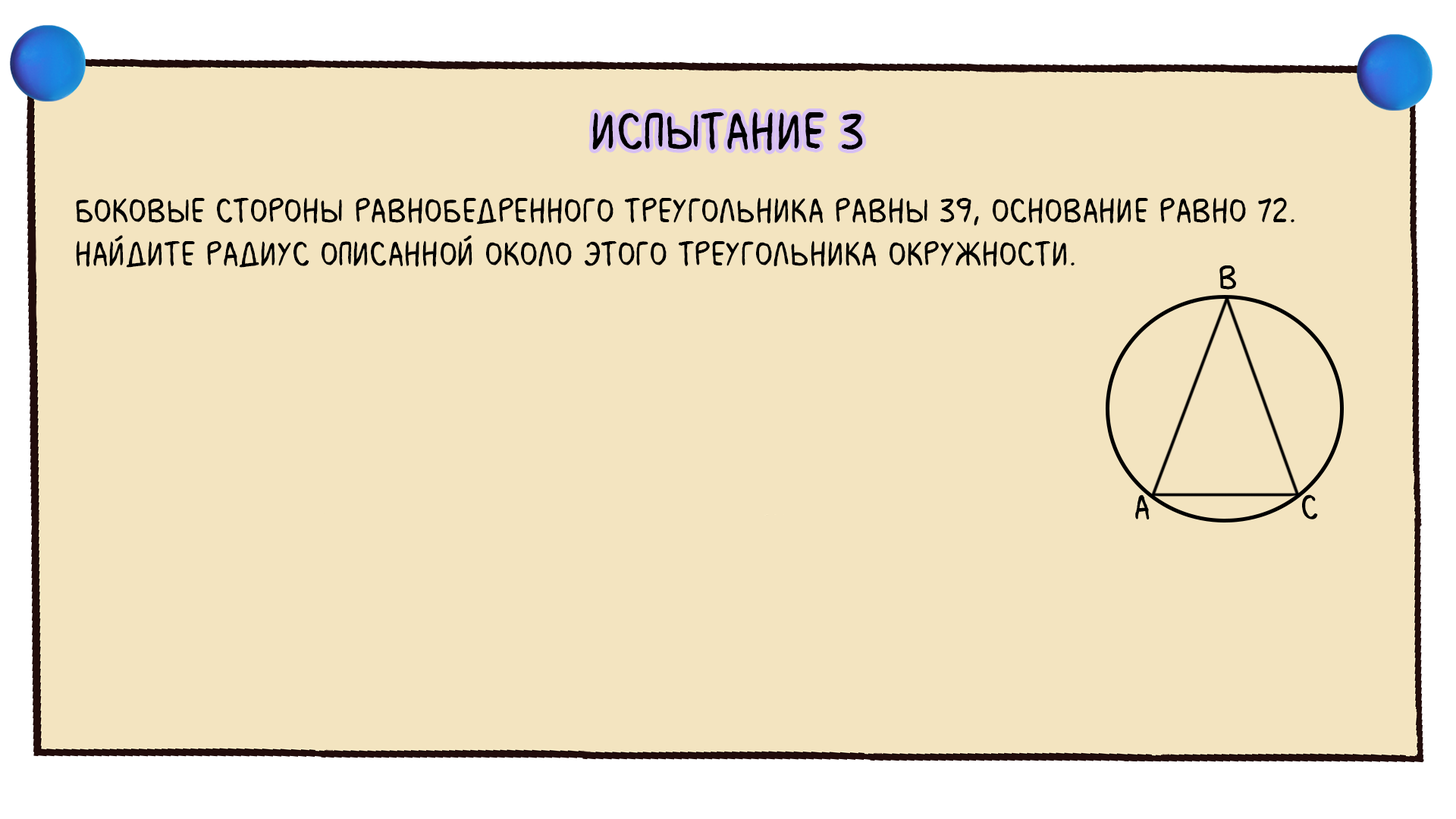
<style>
.page{position:relative;width:1456px;height:819px;background:#f3e4c0}
.page>*{position:absolute;margin:0}
.t1{font:54.6px "MilkMustacheBB";color:#000000}
.t2{font:36.4px "MilkMustacheBB";color:#000000}
</style>
<div class="page">
<p class="t1" style="left:592px;top:111px;width:271px;height:40px">испытание 3</p>
<p class="t2" style="left:76px;top:197px;width:1218px;height:71px">Боковые стороны равнобедренного треугольника равны 39, основание равно 72.  <br>Найдите радиус описанной около этого треугольника окружности.</p>
</div>
